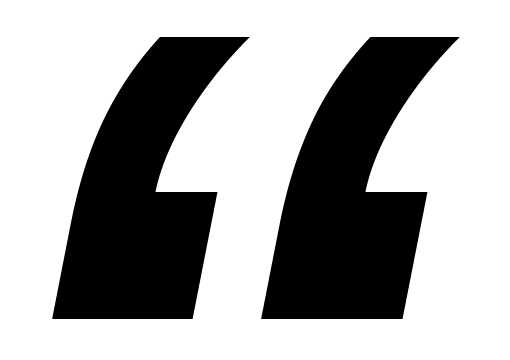
<style>
.page{position:relative;width:510px;height:360px;background:#ffffff}
.page>*{position:absolute;margin:0}
.t1{font:1000px "Arimo-BoldItalic";color:#000000}
</style>
<div class="page">
<p class="t1" style="left:52px;top:37px;width:408px;height:282px">“</p>
</div>
